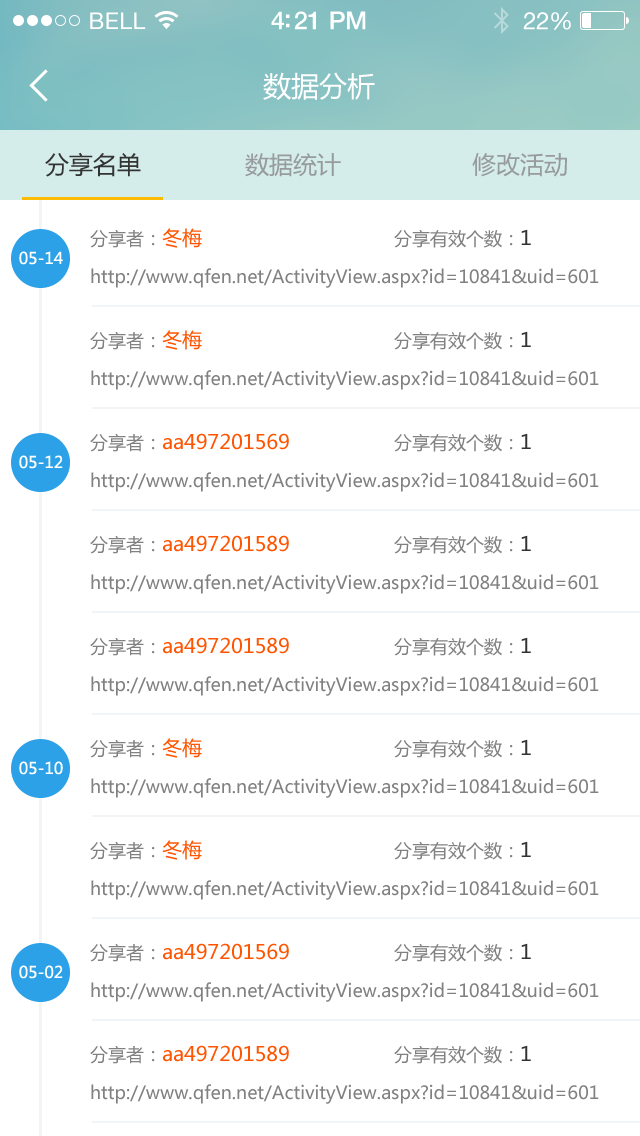
<style>
.page{position:relative;width:640px;height:1136px;background:#ffffff}
.page>*{position:absolute;margin:0}
.t1{font:23px "HelveticaNeue";letter-spacing:0.02em;color:#ffffff}
.t2{font:25px "HelveticaNeue-Medium";letter-spacing:-0.02em;color:#ffffff}
.t3{font:24px "HelveticaNeue";letter-spacing:-0.02em;color:#ffffff}
.t4{font:28px "MicrosoftYaHei";color:#ffffff}
.t5{font:24px "MicrosoftYaHei";color:#333333}
.t6{font:24px "MicrosoftYaHei";color:#979b9d}
.t7{font:18px "MicrosoftYaHei";color:#818181}
.t8{font:20px "MicrosoftYaHei";color:#ff5400}
.t9{font:20px "MicrosoftYaHei";color:#333333}
.t10{font:16px "MicrosoftYaHei";color:#ffffff}
</style>
<div class="page">
<p class="t1" style="left:90px;top:12px;width:56px;height:17px">BELL</p>
<p class="t2" style="left:271px;top:11px;width:95px;height:19px">4:21 PM</p>
<p class="t3" style="left:523px;top:12px;width:48px;height:18px">22%</p>
<p class="t4" style="left:263px;top:72px;width:112px;height:28px">数据分析</p>
<p class="t5" style="left:45px;top:152px;width:96px;height:25px">分享名单</p>
<p class="t6" style="left:245px;top:153px;width:96px;height:24px">数据统计</p>
<p class="t6" style="left:472px;top:153px;width:95px;height:24px">修改活动</p>
<p class="t7" style="left:90px;top:228px;width:112px;height:20px">分享者：<span class="t8">冬梅</span></p>
<p class="t7" style="left:394px;top:229px;width:137px;height:19px">分享有效个数：<span class="t9">1</span></p>
<p class="t10" style="left:19px;top:251px;width:44px;height:14px">05-14</p>
<p class="t7" style="left:91px;top:268px;width:508px;height:20px">http://www.qfen.net/ActivityView.aspx?id=10841&amp;uid=601</p>
<p class="t7" style="left:90px;top:330px;width:112px;height:20px">分享者：<span class="t8">冬梅</span></p>
<p class="t7" style="left:394px;top:331px;width:137px;height:19px">分享有效个数：<span class="t9">1</span></p>
<p class="t7" style="left:91px;top:370px;width:508px;height:20px">http://www.qfen.net/ActivityView.aspx?id=10841&amp;uid=601</p>
<p class="t8" style="left:90px;top:433px;width:199px;height:19px"><span class="t7">分享者：</span>aa497201569</p>
<p class="t7" style="left:394px;top:433px;width:137px;height:19px">分享有效个数：<span class="t9">1</span></p>
<p class="t10" style="left:19px;top:455px;width:44px;height:14px">05-12</p>
<p class="t7" style="left:91px;top:472px;width:508px;height:20px">http://www.qfen.net/ActivityView.aspx?id=10841&amp;uid=601</p>
<p class="t8" style="left:90px;top:535px;width:199px;height:19px"><span class="t7">分享者：</span>aa497201589</p>
<p class="t7" style="left:394px;top:535px;width:137px;height:19px">分享有效个数：<span class="t9">1</span></p>
<p class="t7" style="left:91px;top:574px;width:508px;height:20px">http://www.qfen.net/ActivityView.aspx?id=10841&amp;uid=601</p>
<p class="t8" style="left:90px;top:637px;width:199px;height:19px"><span class="t7">分享者：</span>aa497201589</p>
<p class="t7" style="left:394px;top:637px;width:137px;height:19px">分享有效个数：<span class="t9">1</span></p>
<p class="t7" style="left:91px;top:676px;width:508px;height:20px">http://www.qfen.net/ActivityView.aspx?id=10841&amp;uid=601</p>
<p class="t7" style="left:90px;top:738px;width:112px;height:20px">分享者：<span class="t8">冬梅</span></p>
<p class="t7" style="left:394px;top:739px;width:137px;height:19px">分享有效个数：<span class="t9">1</span></p>
<p class="t10" style="left:19px;top:761px;width:44px;height:14px">05-10</p>
<p class="t7" style="left:91px;top:778px;width:508px;height:20px">http://www.qfen.net/ActivityView.aspx?id=10841&amp;uid=601</p>
<p class="t7" style="left:90px;top:840px;width:112px;height:20px">分享者：<span class="t8">冬梅</span></p>
<p class="t7" style="left:394px;top:841px;width:137px;height:19px">分享有效个数：<span class="t9">1</span></p>
<p class="t7" style="left:91px;top:880px;width:508px;height:20px">http://www.qfen.net/ActivityView.aspx?id=10841&amp;uid=601</p>
<p class="t8" style="left:90px;top:943px;width:199px;height:19px"><span class="t7">分享者：</span>aa497201569</p>
<p class="t7" style="left:394px;top:943px;width:137px;height:19px">分享有效个数：<span class="t9">1</span></p>
<p class="t10" style="left:19px;top:965px;width:44px;height:14px">05-02</p>
<p class="t7" style="left:91px;top:982px;width:508px;height:20px">http://www.qfen.net/ActivityView.aspx?id=10841&amp;uid=601</p>
<p class="t8" style="left:90px;top:1045px;width:199px;height:19px"><span class="t7">分享者：</span>aa497201589</p>
<p class="t7" style="left:394px;top:1045px;width:137px;height:19px">分享有效个数：<span class="t9">1</span></p>
<p class="t7" style="left:91px;top:1084px;width:508px;height:20px">http://www.qfen.net/ActivityView.aspx?id=10841&amp;uid=601</p>
</div>
